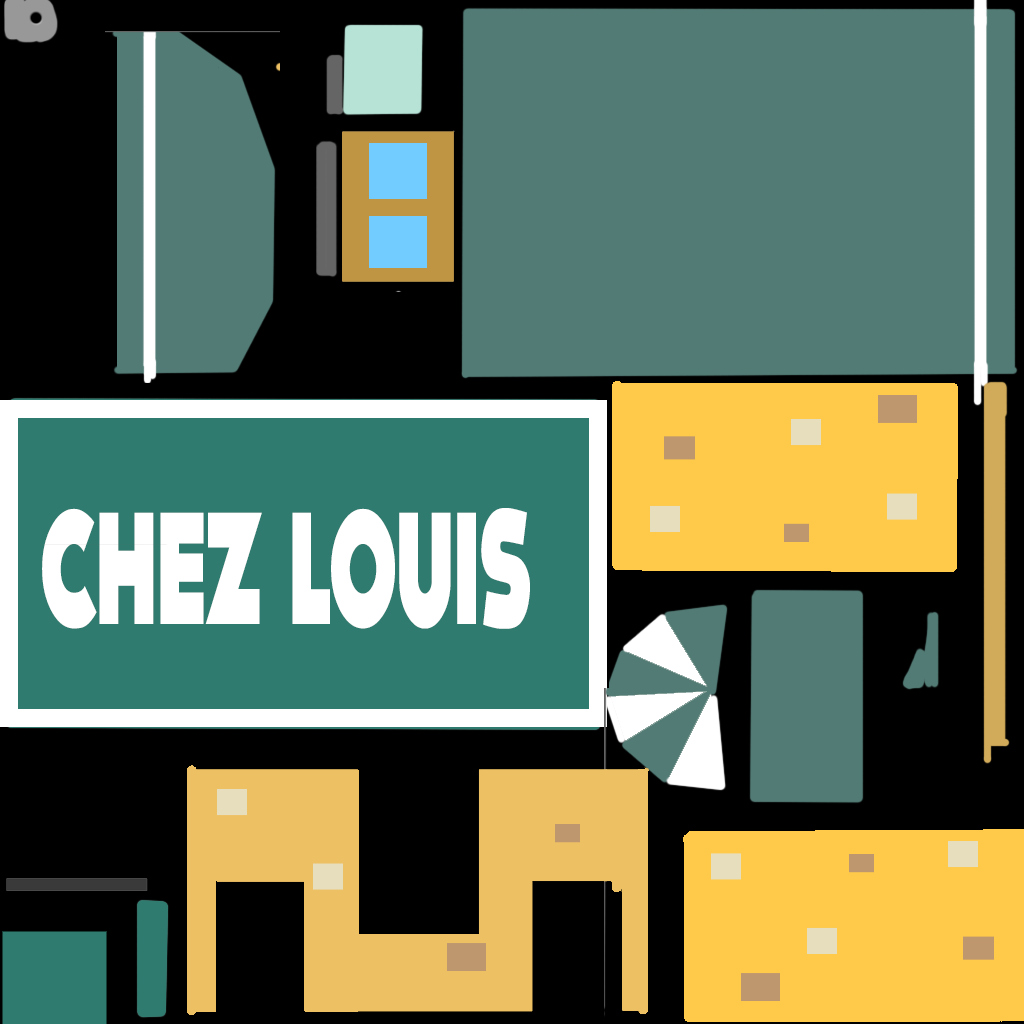
<style>
.page{position:relative;width:1024px;height:1024px;background:#000000}
.page>*{position:absolute;margin:0}
.t1{font:160.2px "DOCK11-Heavy";color:#ffffff;scale:0.53 1}
</style>
<div class="page">
<p class="t1" style="left:42px;top:508px;width:488px;height:121px">CHEZ LOUIS</p>
</div>
